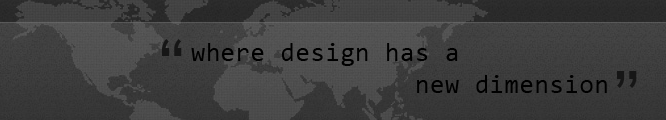
<style>
.page{position:relative;width:666px;height:120px}
.page>*{position:absolute;margin:0}
.t1{font:65px "TwCenMT-Regular";color:#161616}
.t2{font:26px/20px "Consolas";letter-spacing:0.025em;color:#000000}
.t3{font:65px "TwCenMT-Regular";color:#171717}
</style>
<div class="page">
<p class="t1" style="left:162px;top:39px;width:20px;height:17px">“</p>
<p class="t2" style="left:191px;top:43px;width:416px;height:50px">where design has a <br>                  new dimension</p>
<p class="t3" style="left:617px;top:71px;width:20px;height:17px">”</p>
</div>
